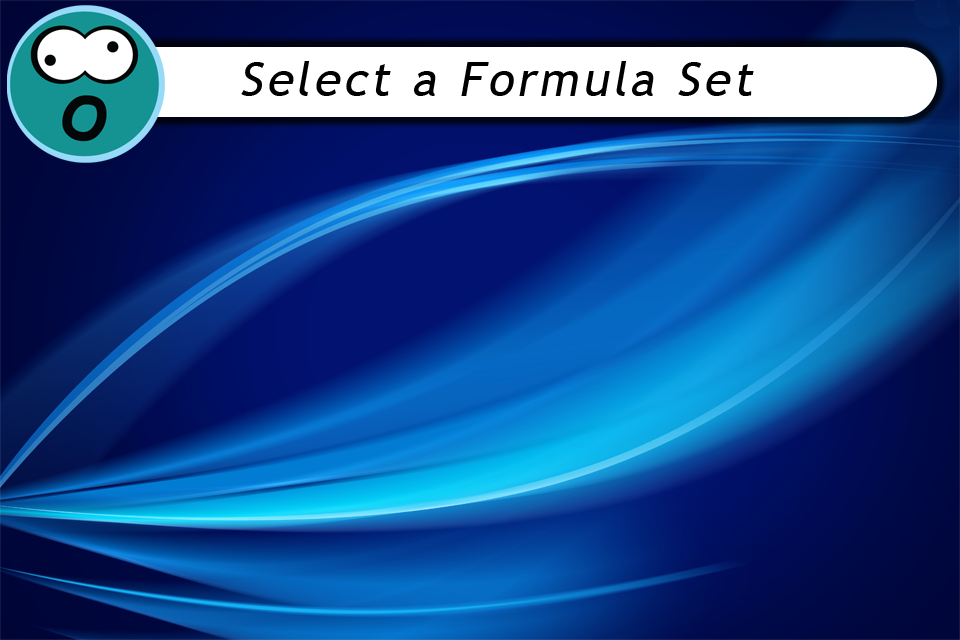
<style>
.page{position:relative;width:960px;height:640px}
.page>*{position:absolute;margin:0}
.t1{font:48px "TrebuchetMS";letter-spacing:0.075em;color:#000000;font-style:italic}
</style>
<div class="page">
<p class="t1" style="left:241px;top:61px;width:513px;height:35px">Select a Formula Set</p>
</div>
